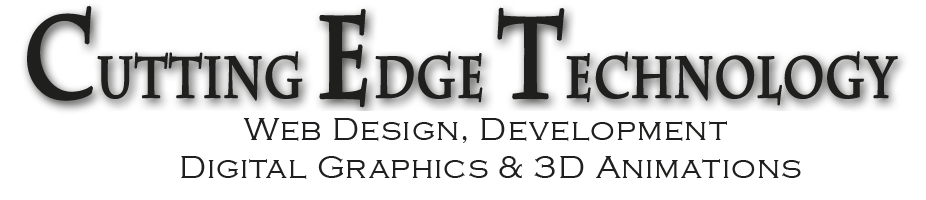
<style>
.page{position:relative;width:926px;height:200px;background:#ffffff}
.page>*{position:absolute;margin:0}
.t1{font:33.3px/37.5px "CopperplateGothic-Light";letter-spacing:0.025em;color:#1f1f1e}
</style>
<div class="page">
<p class="t1" style="left:181px;top:118px;width:620px;height:61px;text-align:center">Web Design, Development <br>Digital Graphics &amp; 3D Animations</p>
</div>
